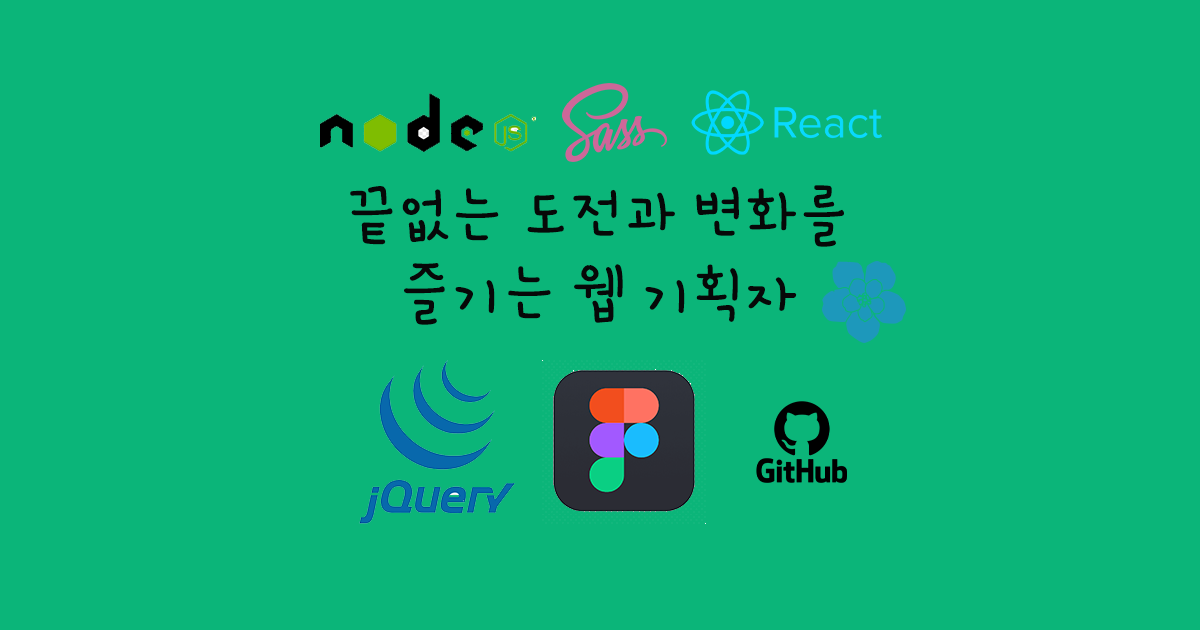
<style>
.page{position:relative;width:1200px;height:630px;background:#0bb579}
.page>*{position:absolute;margin:0}
.t1{font:65px "GamjaFlower-Regular";color:#070808}
</style>
<div class="page">
<p class="t1" style="left:350px;top:185px;width:494px;height:140px;text-align:center">끝없는 도전과 변화를 즐기는 웹 기획자</p>
</div>
